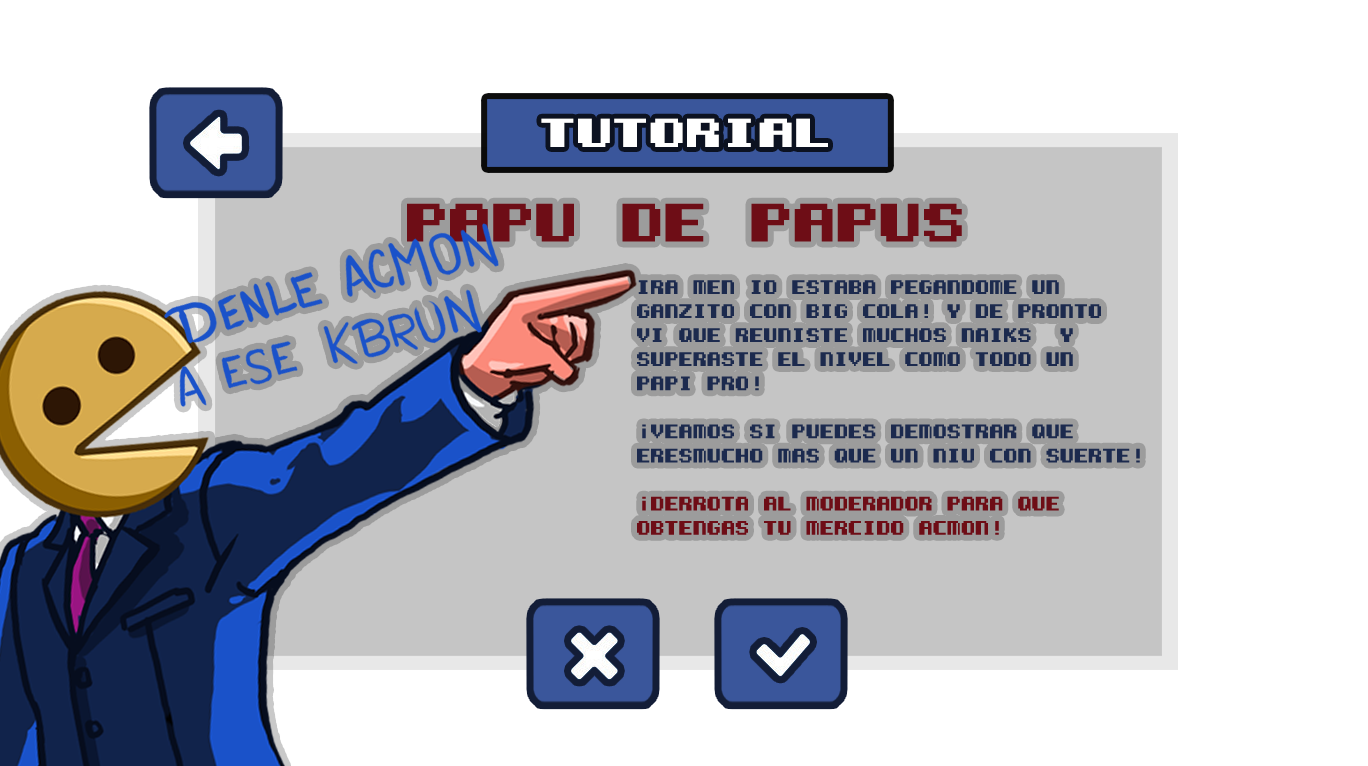
<style>
.page{position:relative;width:1368px;height:766px;background:#ffffff}
.page>*{position:absolute;margin:0}
.t1{font:41.5px "KemcoPixelBold";color:#ffffff;scale:1.12 1}
.t2{font:55.4px "KemcoPixelBold";color:#6e0d16}
.t3{font:20.1px "KemcoPixelBold";color:#1c2a4e;scale:0.9 1}
.t4{font:20.1px "KemcoPixelBold";color:#6e0d16;scale:0.9 1}
</style>
<div class="page">
<p class="t1" style="left:541px;top:118px;width:287px;height:29px">tutorial</p>
<p class="t2" style="left:407px;top:203px;width:555px;height:39px">papu de papus</p>
<p class="t3" style="left:637px;top:280px;width:503px;height:255px">ira men io estaba pegandome un<br>ganzito con big cola! y de pronto <br>vi que reuniste muchos naiks  y <br>superaste el nivel como todo un <br>papi pro!<br> <br>¡veamos si puedes demostrar que <br>eresmucho mas que un niu con suerte!<br><br><span class="t4">¡derrota al moderador para que <br>obtengas tu mercido acmon!</span></p>
</div>
